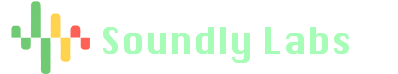
<style>
.page{position:relative;width:398px;height:74px;background:#ffffff}
.page>*{position:absolute;margin:0}
.t1{font:36px "Silom";color:#a7fcb7}
</style>
<div class="page">
<p class="t1" style="left:103px;top:27px;width:246px;height:36px">Soundly Labs</p>
</div>
